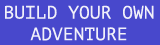
<style>
.page{position:relative;width:160px;height:45px;background:#4848cc}
.page>*{position:absolute;margin:0}
.t1{font:18px "PTMono-Regular";color:#f1f0f9}
</style>
<div class="page">
<p class="t1" style="left:5px;top:5px;width:149px;height:36px;text-align:center">BUILD YOUR OWN<br>ADVENTURE</p>
</div>
